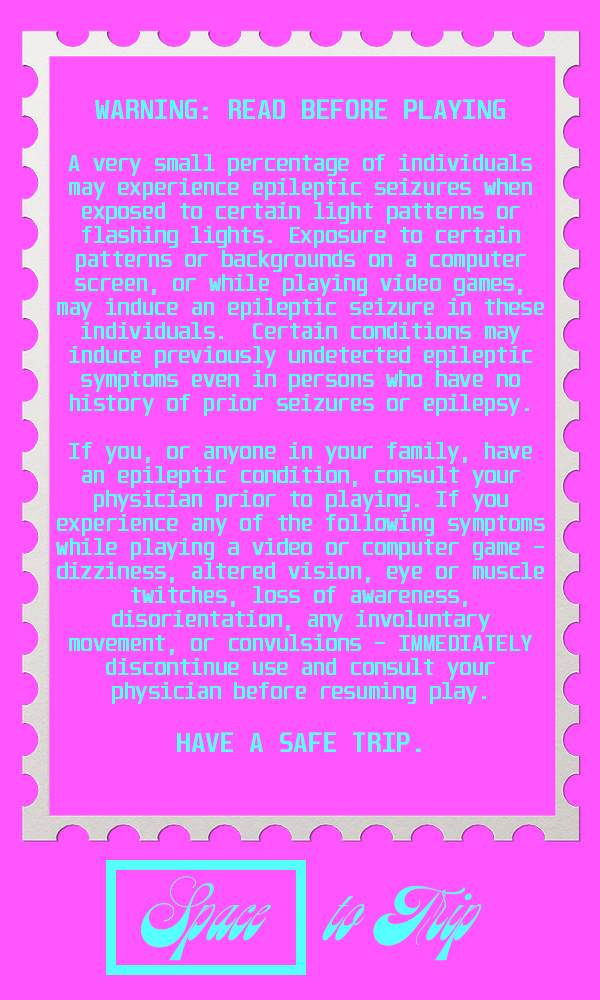
<style>
.page{position:relative;width:600px;height:1000px;background:#ff55ff}
.page>*{position:absolute;margin:0}
.t1{font:20px "Unispace-Bold";color:#55ffff}
.t2{font:24px "Unispace-Bold";color:#55ffff}
.t3{font:72px "Beatle-Regular";letter-spacing:0.04em;color:#55ffff}
</style>
<div class="page">
<p class="t1" style="left:56px;top:99px;width:489px;height:653px;text-align:center"><span class="t2">WARNING: READ BEFORE PLAYING<br><br></span>A very small percentage of individuals may experience epileptic seizures when exposed to certain light patterns or flashing lights. Exposure to certain patterns or backgrounds on a computer screen, or while playing video games, may induce an epileptic seizure in these individuals.  Certain conditions may induce previously undetected epileptic symptoms even in persons who have no history of prior seizures or epilepsy. <br><br>If you, or anyone in your family, have an epileptic condition, consult your physician prior to playing. If you experience any of the following symptoms while playing a video or computer game – dizziness, altered vision, eye or muscle twitches, loss of awareness, disorientation, any involuntary movement, or convulsions – IMMEDIATELY discontinue use and consult your physician before resuming play.<br><br><span class="t2">HAVE A SAFE TRIP.</span></p>
<p class="t3" style="left:141px;top:876px;width:130px;height:85px">Space</p>
<p class="t3" style="left:322px;top:885px;width:160px;height:76px">to Trip</p>
</div>
